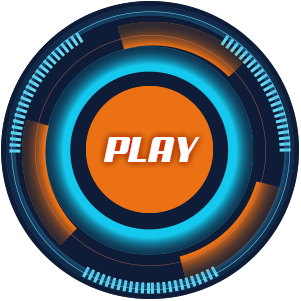
<style>
.page{position:relative;width:301px;height:301px;background:#ffffff}
.page>*{position:absolute;margin:0}
.t1{font:35.7px "Aero";color:#ffffff}
</style>
<div class="page">
<p class="t1" style="left:103px;top:137px;width:97px;height:25px">PLAY</p>
</div>
